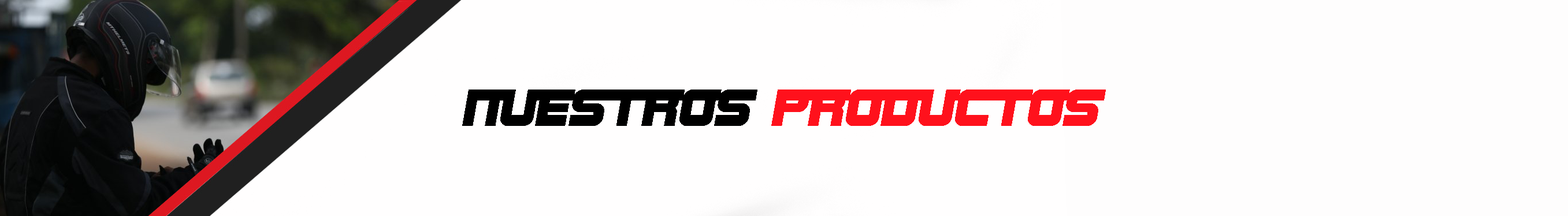
<style>
.page{position:relative;width:1568px;height:216px;background:#fffefe}
.page>*{position:absolute;margin:0}
.t1{font:54.6px "SFSportsNightNSAlternate";color:#ff111c}
.t2{font:54.6px "SFSportsNightNSAlternate";color:#000000}
</style>
<div class="page">
<p class="t1" style="left:462px;top:90px;width:644px;height:36px"><span class="t2">nuestros </span>productos</p>
</div>
